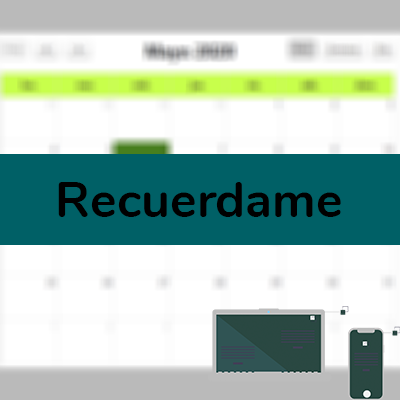
<style>
.page{position:relative;width:400px;height:400px;background:#ffffff}
.page>*{position:absolute;margin:0}
.t1{font:50px "Nunito-Bold";color:#000000}
</style>
<div class="page">
<p class="t1" style="left:58px;top:182px;width:283px;height:35px">Recuerdame</p>
</div>
